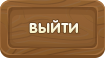
<style>
.page{position:relative;width:105px;height:58px}
.page>*{position:absolute;margin:0}
.t1{font:14px "RotondaC-Bold";letter-spacing:0.06em;color:#f9f5d9;text-transform:uppercase}
</style>
<div class="page">
<p class="t1" style="left:29px;top:20px;width:49px;height:13px">Выйти</p>
</div>
